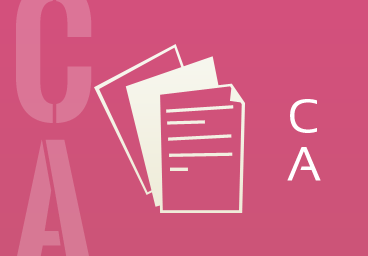
<style>
.page{position:relative;width:368px;height:256px}
.page>*{position:absolute;margin:0}
.t1{font:48px "Sansation-Regular";letter-spacing:-0.005em;color:#ffffff}
</style>
<div class="page">
<p class="t1" style="left:287px;top:99px;width:34px;height:82px">CA</p>
</div>
